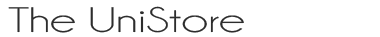
<style>
.page{position:relative;width:380px;height:37px;background:#ffffff}
.page>*{position:absolute;margin:0}
.t1{font:36px "Champagne&Limousines";color:#2d2d2d;scale:1.4 1}
</style>
<div class="page">
<p class="t1" style="left:8px;top:6px;width:236px;height:27px">The UniStore</p>
</div>
